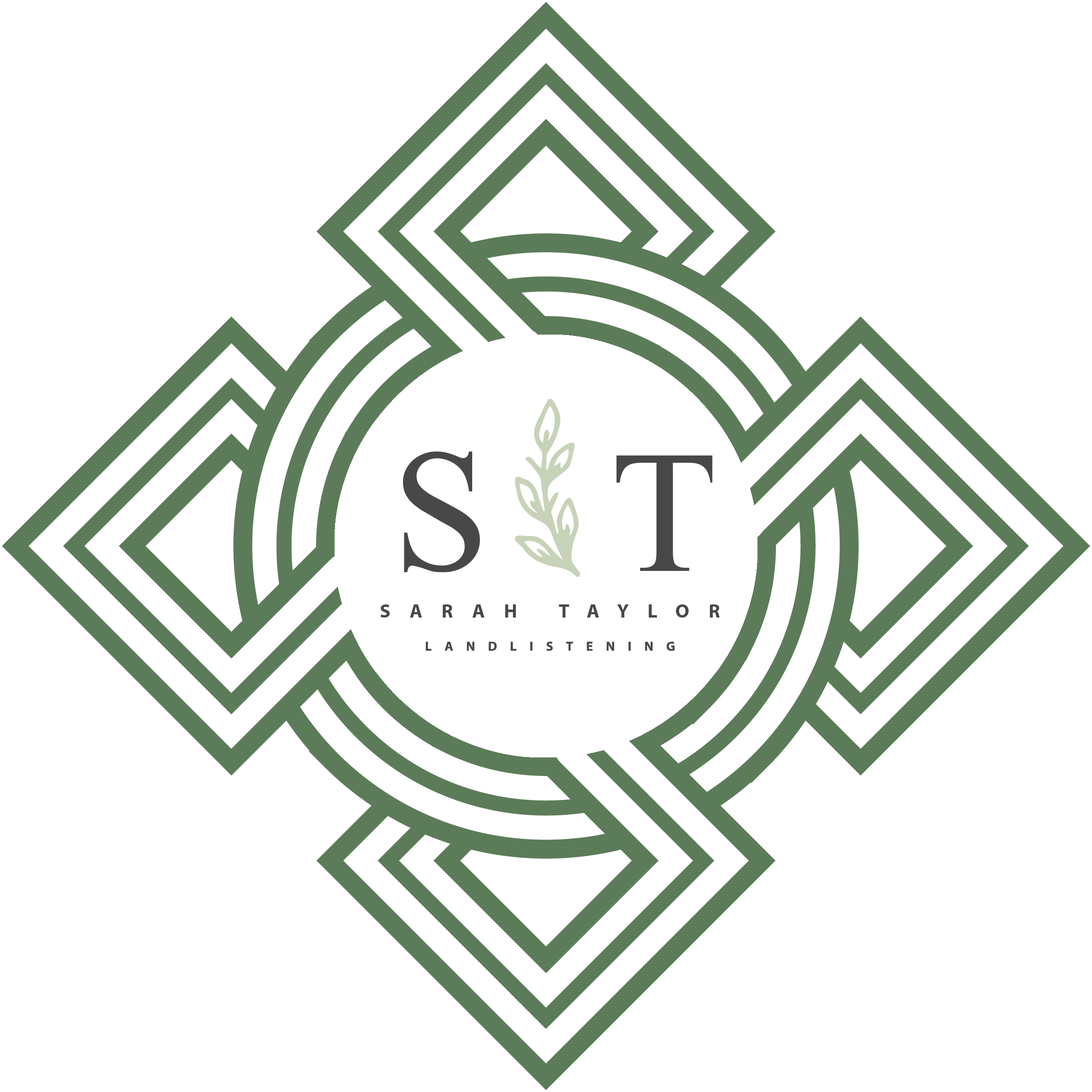
<style>
.page{position:relative;width:1092px;height:1092px;background:#ffffff}
.page>*{position:absolute;margin:0}
.t1{font:174.5px "MongolianBaiti";color:#494848}
.t2{font:19.4px "MyriadPro-Bold";letter-spacing:0.98em;color:#494848}
.t3{font:13.1px "MyriadPro-Bold";letter-spacing:0.98em;color:#494848}
</style>
<div class="page">
<p class="t1" style="left:403px;top:451px;width:77px;height:121px">S</p>
<p class="t1" style="left:616px;top:455px;width:97px;height:116px">T</p>
<p class="t2" style="left:380px;top:604px;width:340px;height:14px">SARAH TAYLOR</p>
<p class="t3" style="left:426px;top:642px;width:249px;height:9px">LANDLISTENING</p>
</div>
